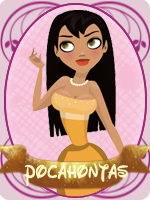
<style>
.page{position:relative;width:150px;height:200px}
.page>*{position:absolute;margin:0}
.t1{font:37.4px "Waltograph";color:#fcfac7;scale:0.85 1}
</style>
<div class="page">
<p class="t1" style="left:24px;top:163px;width:104px;height:23px">pocahontas</p>
</div>
